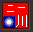
<style>
.page{position:relative;width:33px;height:32px;background:#f20000}
.page>*{position:absolute;margin:0}
.t1{font:10.4px "SimSun";color:#ffffff}
.t2{font:11.7px "SimSun";color:#ffffff}
</style>
<div class="page">
<p class="t1" style="left:7px;top:5px;width:18px;height:7px">二一</p>
<p class="t2" style="left:16px;top:15px;width:11px;height:12px">川</p>
</div>
